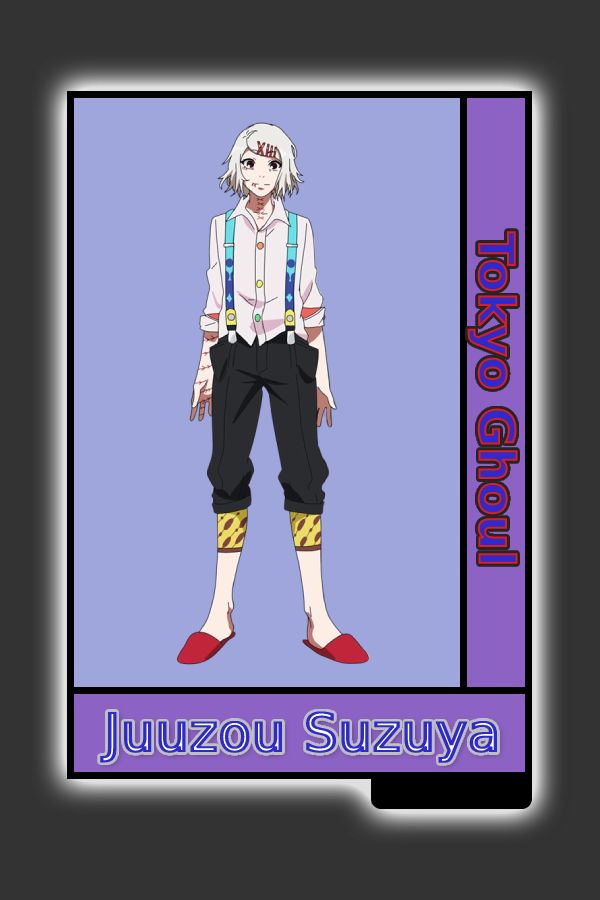
<style>
.page{position:relative;width:600px;height:900px;background:#9ea6db}
.page>*{position:absolute;margin:0}
.t1{font:48.8px "MADETOMMY-Bold"}
.t2{font:52px "CoolveticaRg-Regular";font-weight:bold}
</style>
<div class="page">
<p class="t1" style="left:467px;top:231px;width:51px;height:333px;rotate:90deg">Tokyo Ghoul</p>
<p class="t2" style="left:100px;top:711px;width:398px;height:52px">Juuzou Suzuya</p>
</div>
